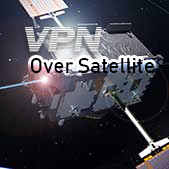
<style>
.page{position:relative;width:169px;height:169px}
.page>*{position:absolute;margin:0}
.t1{font:38px "LinearBeam05";color:#ffffff}
.t2{font:21px "Bahnschrift";color:#000000}
</style>
<div class="page">
<p class="t1" style="left:25px;top:27px;width:77px;height:25px">VPN</p>
<p class="t2" style="left:30px;top:57px;width:124px;height:17px">Over Satellite</p>
</div>
